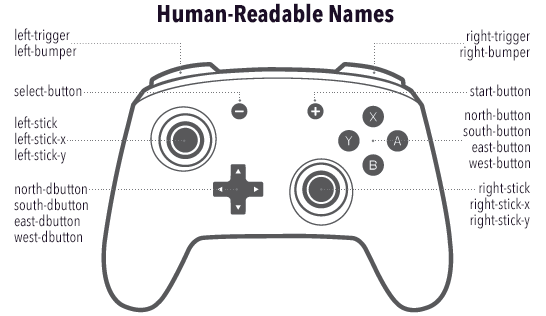
<style>
.page{position:relative;width:546px;height:316px;background:#ffffff}
.page>*{position:absolute;margin:0}
.t1{font:24px "AvenirNextCondensed-Bold";color:#1c0e27}
.t2{font:15px/16px "AvenirNextCondensed-Regular";color:#1c0e27}
.t3{font:15px "AvenirNextCondensed-Regular";color:#1c0e27}
</style>
<div class="page">
<p class="t1" style="left:158px;top:3px;width:236px;height:20px">Human-Readable Names</p>
<p class="t2" style="left:15px;top:28px;width:62px;height:32px">left-trigger<br>left-bumper</p>
<p class="t2" style="left:460px;top:29px;width:70px;height:32px;text-align:right">right-trigger<br>right-bumper</p>
<p class="t3" style="left:14px;top:84px;width:68px;height:13px">select-button</p>
<p class="t3" style="left:470px;top:84px;width:60px;height:13px">start-button</p>
<p class="t2" style="left:463px;top:108px;width:67px;height:61px;text-align:right">north-button<br>south-button<br>east-button<br>west-button</p>
<p class="t2" style="left:15px;top:116px;width:51px;height:48px">left-stick<br>left-stick-x<br>left-stick-y</p>
<p class="t2" style="left:14px;top:182px;width:74px;height:61px">north-dbutton<br>south-dbutton<br>east-dbutton<br>west-dbutton</p>
<p class="t2" style="left:470px;top:181px;width:60px;height:48px;text-align:right">right-stick<br>right-stick-x<br>right-stick-y</p>
</div>
